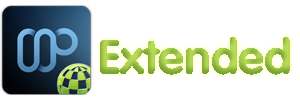
<style>
.page{position:relative;width:300px;height:100px;background:#ffffff}
.page>*{position:absolute;margin:0}
.t1{font:48px "AvalonType-Bold"}
</style>
<div class="page">
<p class="t1" style="left:100px;top:37px;width:190px;height:38px">Extended</p>
</div>
